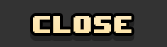
<style>
.page{position:relative;width:167px;height:47px;background:#333333}
.page>*{position:absolute;margin:0}
.t1{font:20.7px "8BITWONDERNominal";color:#fde7b4}
</style>
<div class="page">
<p class="t1" style="left:33px;top:16px;width:99px;height:17px">close</p>
</div>
